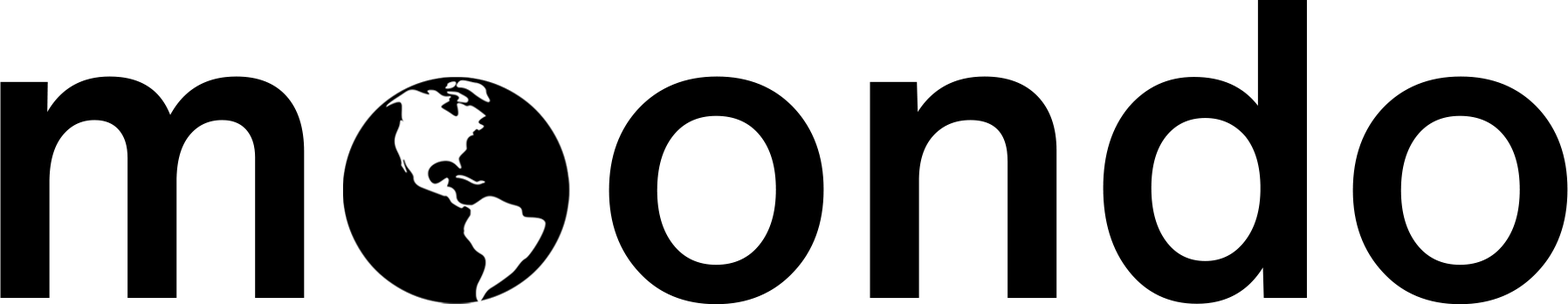
<style>
.page{position:relative;width:1568px;height:304px;background:#ffffff}
.page>*{position:absolute;margin:0}
.t1{font:418.3px "HelveticaNowText-Medium";color:#000000}
</style>
<div class="page">
<p class="t1" style="left:609px;top:0px;width:959px;height:305px">ondo</p>
<p class="t1" style="left:0px;top:76px;width:305px;height:222px">m</p>
</div>
